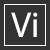
<style>
.page{position:relative;width:50px;height:50px;background:#333333}
.page>*{position:absolute;margin:0}
.t1{font:36px "MyriadPro-Regular";color:#ffffff}
</style>
<div class="page">
<p class="t1" style="left:11px;top:12px;width:27px;height:25px">Vi</p>
</div>
